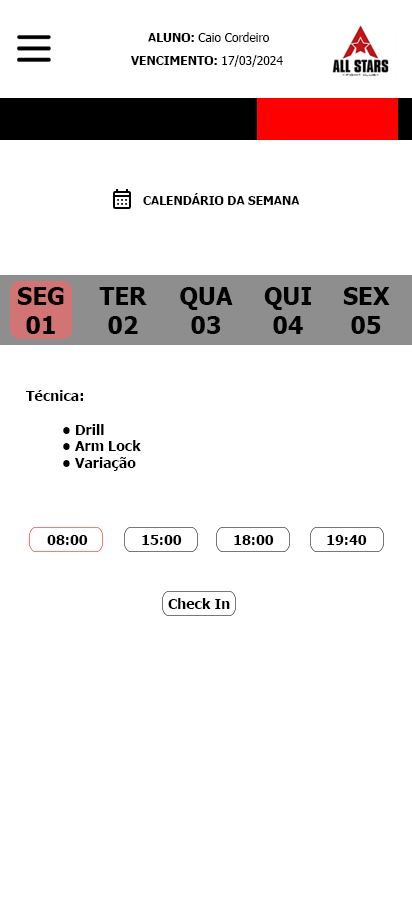
<style>
.page{position:relative;width:412px;height:915px;background:#ffffff}
.page>*{position:absolute;margin:0}
.t1{font:12px "Tahoma";color:#000000}
.t2{font:12px "Tahoma-Bold";color:#000000}
.t3{font:24px "Tahoma-Bold";color:#000000}
.t4{font:14px "Tahoma-Bold";color:#000000}
</style>
<div class="page">
<p class="t1" style="left:148px;top:32px;width:121px;height:10px"><span class="t2">ALUNO: </span>Caio Cordeiro</p>
<p class="t2" style="left:131px;top:55px;width:152px;height:12px">VENCIMENTO: <span class="t1">17/03/2024</span></p>
<p class="t2" style="left:143px;top:193px;width:157px;height:12px">CALENDÁRIO DA SEMANA</p>
<p class="t3" style="left:17px;top:287px;width:47px;height:47px;text-align:center">SEG<br>01</p>
<p class="t3" style="left:99px;top:287px;width:48px;height:47px;text-align:center">TER<br>02</p>
<p class="t3" style="left:180px;top:287px;width:53px;height:47px;text-align:center">QUA<br>03</p>
<p class="t3" style="left:264px;top:287px;width:47px;height:47px;text-align:center">QUI<br>04</p>
<p class="t3" style="left:343px;top:287px;width:47px;height:47px;text-align:center">SEX<br>05</p>
<p class="t4" style="left:26px;top:390px;width:115px;height:81px">Técnica:<br><br> • Drill<br> • Arm Lock<br> • Variação</p>
<p class="t4" style="left:47px;top:535px;width:41px;height:10px">08:00</p>
<p class="t4" style="left:142px;top:535px;width:40px;height:10px">15:00</p>
<p class="t4" style="left:234px;top:535px;width:40px;height:10px">18:00</p>
<p class="t4" style="left:327px;top:535px;width:40px;height:10px">19:40</p>
<p class="t4" style="left:168px;top:598px;width:62px;height:11px">Check In</p>
</div>
